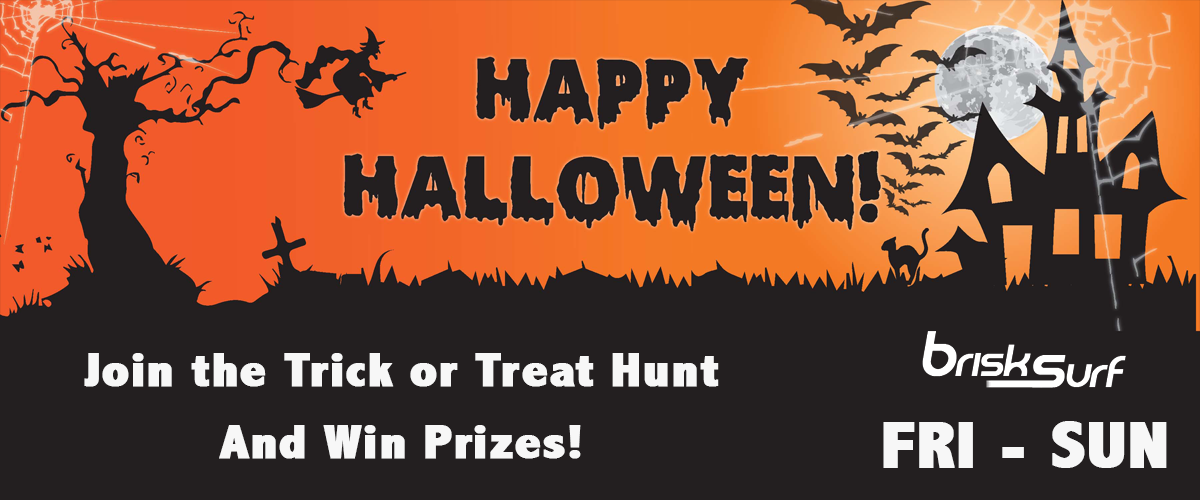
<style>
.page{position:relative;width:1200px;height:500px;background:#231f20}
.page>*{position:absolute;margin:0}
.t1{font:49.2px "AbadiMT-CondensedExtraBold";color:#f7f7f7;font-weight:bold;scale:1.15 1}
.t2{font:65.6px "AbadiMT-CondensedExtraBold";color:#f7f7f7;font-weight:bold;scale:1.15 1}
</style>
<div class="page">
<p class="t1" style="left:84px;top:353px;width:635px;height:106px;text-align:center">Join the Trick or Treat Hunt<br>And Win Prizes!</p>
<p class="t2" style="left:883px;top:421px;width:284px;height:47px">FRI - SUN</p>
</div>
